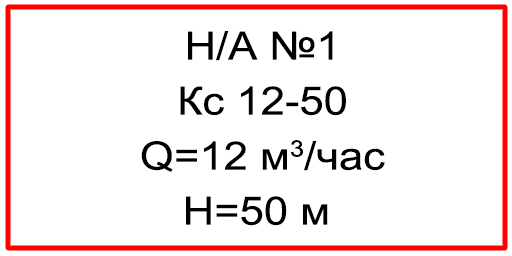
<style>
.page{position:relative;width:512px;height:256px;background:#ffffff}
.page>*{position:absolute;margin:0}
.t1{font:39.1px/55px "ArialMT";color:#000000;scale:1.12 1}
</style>
<div class="page">
<p class="t1" style="left:141px;top:31px;width:244px;height:195px;text-align:center">Н/А №1<br>Кс 12-50<br>Q=12 м3/час<br>Н=50 м</p>
</div>
